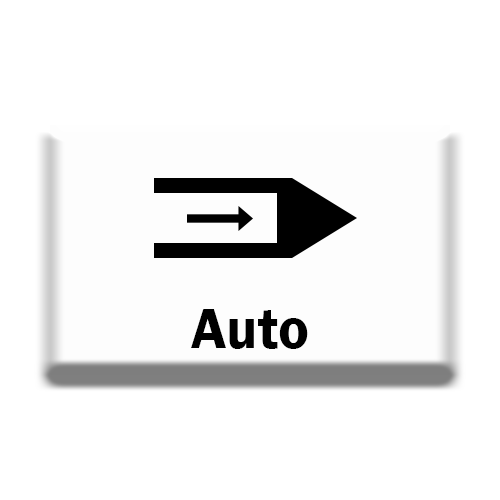
<style>
.page{position:relative;width:500px;height:500px;background:#ffffff}
.page>*{position:absolute;margin:0}
.t1{font:58.3px "FranklinGothic-Demi";color:#000000}
</style>
<div class="page">
<p class="t1" style="left:191px;top:309px;width:117px;height:40px">Auto</p>
</div>
